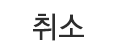
<style>
.page{position:relative;width:118px;height:54px;background:#ffffff}
.page>*{position:absolute;margin:0}
.t1{font:30px "KoPubDotumMedium";color:#2d2d2d;font-weight:bold}
</style>
<div class="page">
<p class="t1" style="left:33px;top:13px;width:51px;height:28px">취소</p>
</div>
